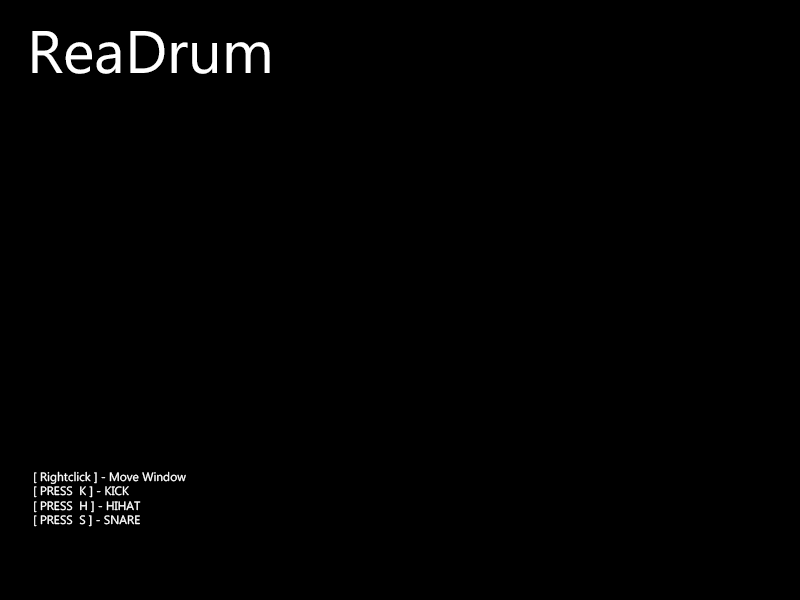
<style>
.page{position:relative;width:800px;height:600px;background:#000000}
.page>*{position:absolute;margin:0}
.t1{font:60px "MicrosoftPhagsPa";color:#ffffff}
.t2{font:12px "MicrosoftPhagsPa";color:#ffffff}
</style>
<div class="page">
<p class="t1" style="left:32px;top:31px;width:238px;height:43px">ReaDrum</p>
<p class="t2" style="left:34px;top:471px;width:152px;height:56px">[ Rightclick ] - Move Window<br>[ PRESS  K ] - KICK<br>[ PRESS  H ] - HIHAT<br>[ PRESS  S ] - SNARE</p>
</div>
